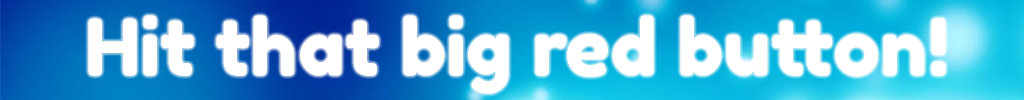
<style>
.page{position:relative;width:1024px;height:100px;background:#ffffff}
.page>*{position:absolute;margin:0}
.t1{font:78.7px "FredokaOne-Regular";color:#ffffff}
</style>
<div class="page">
<p class="t1" style="left:88px;top:15px;width:858px;height:79px">Hit that big red button!</p>
</div>
